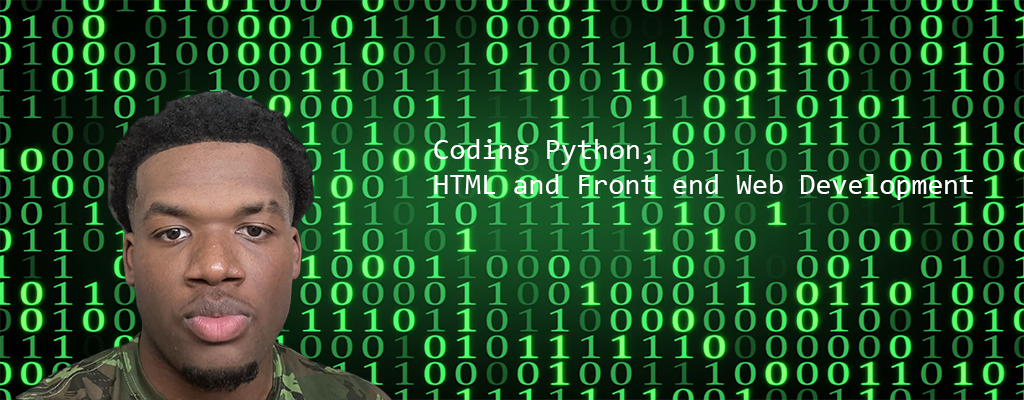
<style>
.page{position:relative;width:1024px;height:400px}
.page>*{position:absolute;margin:0}
.t1{font:29px "Consolas";color:#ffffff}
.t2{font:30px "Consolas";color:#ffffff}
</style>
<div class="page">
<p class="t1" style="left:434px;top:139px;width:539px;height:61px"><span class="t2">C</span>oding Python, <br>HTML and Front end Web Development</p>
</div>
